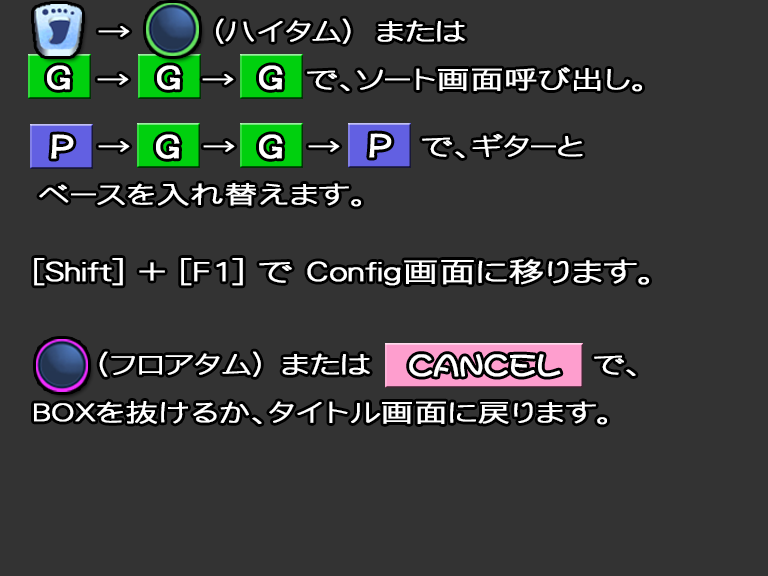
<style>
.page{position:relative;width:768px;height:576px;background:#333333}
.page>*{position:absolute;margin:0}
.t1{font:24.8px/48px "DFGothicP-W3-WING-RKSJ-H";color:#ffffff;font-weight:bold;scale:1.33 1}
.t2{font:30px "DFPOPClip-W7-WINP-RKSJ-H";color:#ffffff;font-weight:bold}
.t3{font:27px "DFGothicP-W3-WING-RKSJ-H";color:#ffffff;font-weight:bold;scale:1.33 1}
.t4{font:30px "DFMaruMojiSQ-W5-WINP-RKSJ-H";color:#ffffff;font-weight:bold}
</style>
<div class="page">
<p class="t1" style="left:97px;top:18px;width:545px;height:74px">→       (ハイタム)  または<br> 　　 →      →      で、ソート画面呼び出し。</p>
<p class="t2" style="left:47px;top:65px;width:24px;height:25px">G</p>
<p class="t2" style="left:157px;top:65px;width:24px;height:25px">G</p>
<p class="t2" style="left:259px;top:65px;width:24px;height:25px">G</p>
<p class="t1" style="left:39px;top:134px;width:544px;height:73px">→      →      →     で、ギターと<br>ベースを入れ替えます。</p>
<p class="t2" style="left:51px;top:134px;width:23px;height:25px">P</p>
<p class="t2" style="left:156px;top:134px;width:24px;height:25px">G</p>
<p class="t2" style="left:259px;top:134px;width:24px;height:25px">G</p>
<p class="t3" style="left:34px;top:258px;width:615px;height:28px">[Shift] + [F1] で Config画面に移ります。</p>
<p class="t1" style="left:34px;top:351px;width:602px;height:74px">（フロアタム） または        で、<br>BOXを抜けるか、タイトル画面に戻ります。</p>
<p class="t4" style="left:409px;top:354px;width:152px;height:23px">CANCEL</p>
</div>
